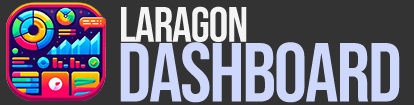
<style>
.page{position:relative;width:414px;height:105px;background:#333333}
.page>*{position:absolute;margin:0}
.t1{font:49.4px "BebasNeue-Regular";letter-spacing:-0.025em;color:#f5f4f4}
.t2{font:83.6px "BebasNeue-Regular";letter-spacing:-0.025em;color:#ced7fc}
</style>
<div class="page">
<p class="t1" style="left:121px;top:6px;width:126px;height:36px">LARAGON</p>
<p class="t2" style="left:120px;top:42px;width:280px;height:61px">DASHBOARD</p>
</div>
